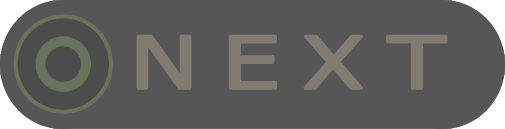
<style>
.page{position:relative;width:505px;height:129px;background:#565656}
.page>*{position:absolute;margin:0}
.t1{font:72px "Tahoma";letter-spacing:0.22em;color:#827b71;font-weight:bold;scale:1.4 1}
</style>
<div class="page">
<p class="t1" style="left:136px;top:34px;width:312px;height:56px">NEXT</p>
</div>
